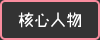
<style>
.page{position:relative;width:100px;height:40px;background:#333333}
.page>*{position:absolute;margin:0}
.t1{font:16px "MFShangHei_Noncommercial-Regular";color:#ffffff}
</style>
<div class="page">
<p class="t1" style="left:18px;top:12px;width:63px;height:16px">核心人物</p>
</div>
